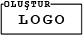
<style>
.page{position:relative;width:83px;height:35px;background:#ffffff}
.page>*{position:absolute;margin:0}
.t1{font:8.9px "CourierNewPS-BoldMT";letter-spacing:0.16em;color:#000000}
.t2{font:16px "CourierNewPS-BoldMT";letter-spacing:0.16em;color:#000000}
</style>
<div class="page">
<p class="t1" style="left:4px;top:1px;width:47px;height:9px">OLUŞTUR</p>
<p class="t2" style="left:18px;top:15px;width:47px;height:9px">LOGO</p>
</div>
